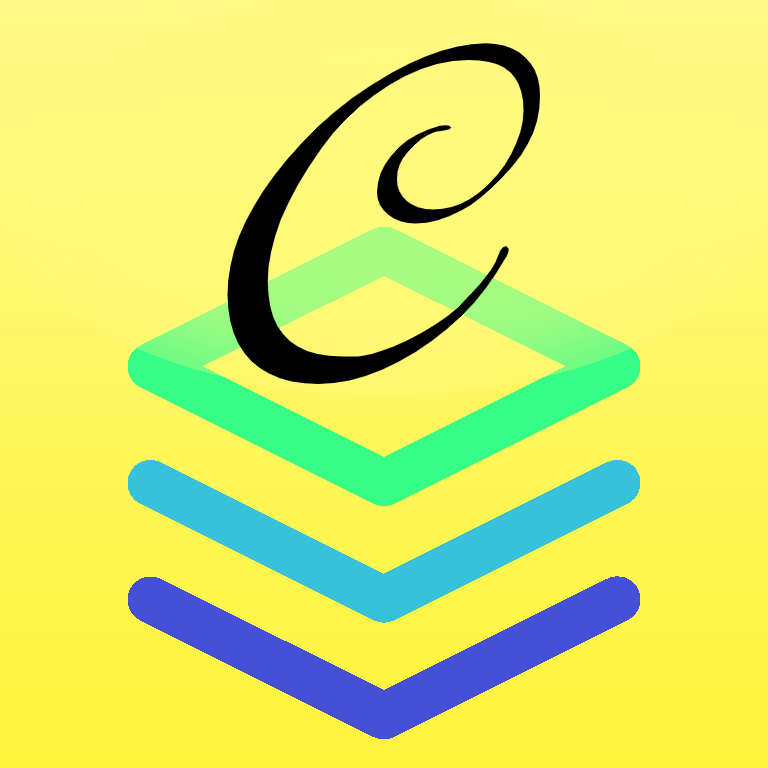
<style>
.page{position:relative;width:768px;height:768px}
.page>*{position:absolute;margin:0}
.t1{font:639px "Ballantines-Regular";color:#000000}
</style>
<div class="page">
<p class="t1" style="left:227px;top:43px;width:314px;height:341px">C</p>
</div>
